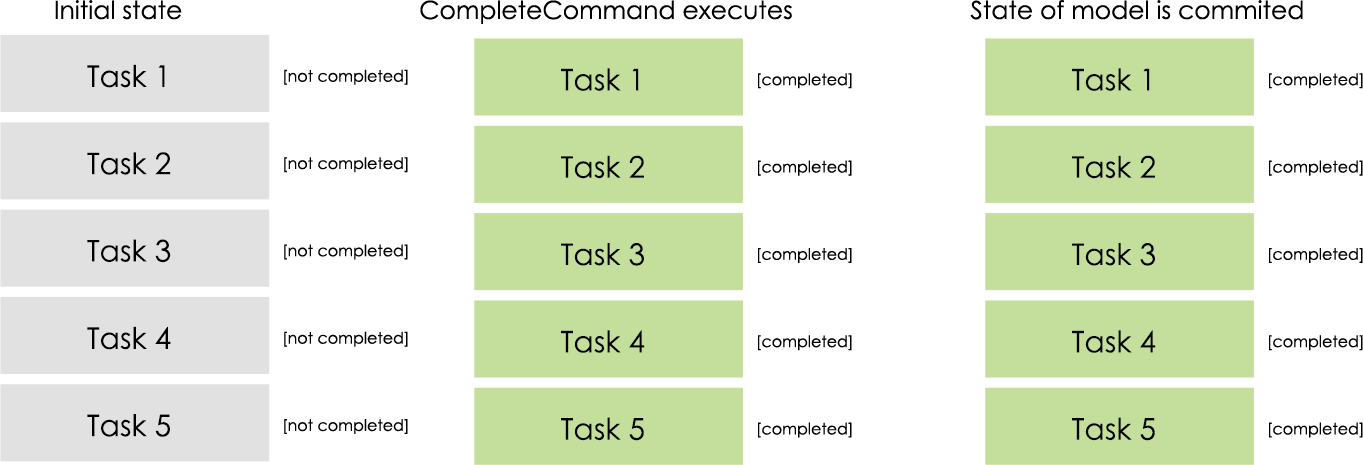
<style>
.page{position:relative;width:1363px;height:465px;background:#ffffff}
.page>*{position:absolute;margin:0}
.t1{font:6px "CenturyGothic";color:#000000}
.t2{font:25px "CenturyGothic";color:#000000}
.t3{font:29.7px "CenturyGothic";color:#000000}
.t4{font:15.9px "CenturyGothic";color:#000000}
</style>
<div class="page">
<p class="t1" style="left:55px;top:0px;width:127px;height:20px">Initial state</p>
<p class="t2" style="left:420px;top:0px;width:372px;height:24px">CompleteCommand executes</p>
<p class="t2" style="left:970px;top:0px;width:333px;height:20px">State of model is commited</p>
<p class="t3" style="left:87px;top:64px;width:78px;height:24px">Task 1</p>
<p class="t4" style="left:284px;top:69px;width:124px;height:16px">[not completed]</p>
<p class="t3" style="left:561px;top:68px;width:78px;height:23px">Task 1</p>
<p class="t4" style="left:758px;top:73px;width:94px;height:16px">[completed]</p>
<p class="t3" style="left:1072px;top:68px;width:78px;height:23px">Task 1</p>
<p class="t4" style="left:1269px;top:73px;width:94px;height:16px">[completed]</p>
<p class="t3" style="left:87px;top:152px;width:84px;height:23px">Task 2</p>
<p class="t4" style="left:284px;top:157px;width:124px;height:16px">[not completed]</p>
<p class="t3" style="left:561px;top:155px;width:83px;height:24px">Task 2</p>
<p class="t4" style="left:758px;top:160px;width:94px;height:16px">[completed]</p>
<p class="t3" style="left:1072px;top:155px;width:83px;height:24px">Task 2</p>
<p class="t4" style="left:1269px;top:160px;width:94px;height:16px">[completed]</p>
<p class="t3" style="left:87px;top:239px;width:84px;height:24px">Task 3</p>
<p class="t4" style="left:284px;top:244px;width:124px;height:16px">[not completed]</p>
<p class="t3" style="left:561px;top:243px;width:83px;height:23px">Task 3</p>
<p class="t3" style="left:1072px;top:243px;width:83px;height:23px">Task 3</p>
<p class="t4" style="left:758px;top:248px;width:94px;height:15px">[completed]</p>
<p class="t4" style="left:1269px;top:248px;width:94px;height:15px">[completed]</p>
<p class="t3" style="left:87px;top:326px;width:84px;height:24px">Task 4</p>
<p class="t4" style="left:284px;top:331px;width:124px;height:16px">[not completed]</p>
<p class="t3" style="left:561px;top:330px;width:84px;height:23px">Task 4</p>
<p class="t4" style="left:758px;top:335px;width:94px;height:16px">[completed]</p>
<p class="t3" style="left:1072px;top:330px;width:84px;height:23px">Task 4</p>
<p class="t4" style="left:1269px;top:335px;width:94px;height:16px">[completed]</p>
<p class="t3" style="left:87px;top:414px;width:83px;height:23px">Task 5</p>
<p class="t4" style="left:284px;top:419px;width:124px;height:15px">[not completed]</p>
<p class="t3" style="left:561px;top:417px;width:83px;height:24px">Task 5</p>
<p class="t4" style="left:758px;top:422px;width:94px;height:16px">[completed]</p>
<p class="t3" style="left:1072px;top:417px;width:83px;height:24px">Task 5</p>
<p class="t4" style="left:1269px;top:422px;width:94px;height:16px">[completed]</p>
</div>
